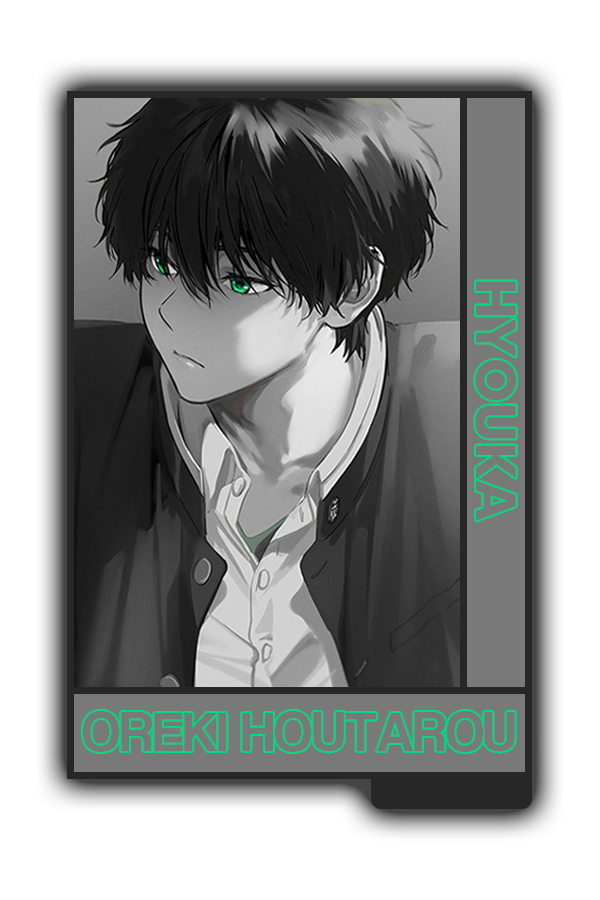
<style>
.page{position:relative;width:600px;height:900px;background:#ffffff}
.page>*{position:absolute;margin:0}
.t1{font:56.7px "MADETOMMY-Bold";color:#777777}
.t2{font:56.5px "CoolveticaRg-Regular";color:#777777}
</style>
<div class="page">
<p class="t1" style="left:475px;top:281px;width:42px;height:240px;rotate:90deg">HYOUKA</p>
<p class="t2" style="left:82px;top:711px;width:433px;height:41px">OREKI HOUTAROU</p>
</div>
